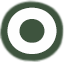
<style>
.page{position:relative;width:64px;height:64px;background:#fefefe}
.page>*{position:absolute;margin:0}
.t1{font:66.3px "FuturaPT-Bold";color:#fefefe}
</style>
<div class="page">
<p class="t1" style="left:7px;top:7px;width:50px;height:47px">O</p>
</div>
